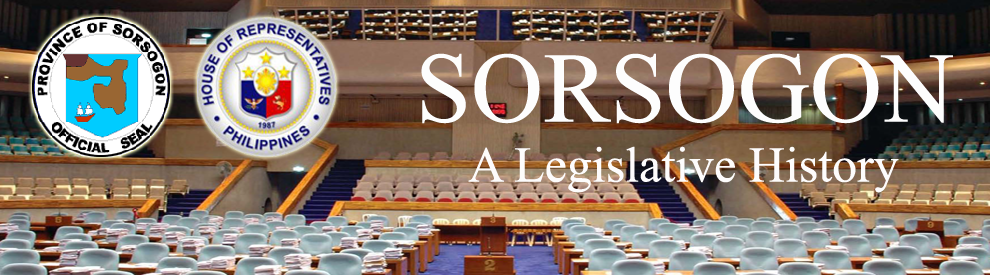
<style>
.page{position:relative;width:990px;height:275px}
.page>*{position:absolute;margin:0}
.t1{font:50px "TimesNewRomanPSMT";color:#fdfcfc}
.t2{font:100px "TimesNewRomanPSMT";color:#fdfdfd}
</style>
<div class="page">
<p class="t1" style="left:421px;top:53px;width:532px;height:140px;text-align:center"><span class="t2">SORSOGON<br></span>A Legislative History</p>
</div>
